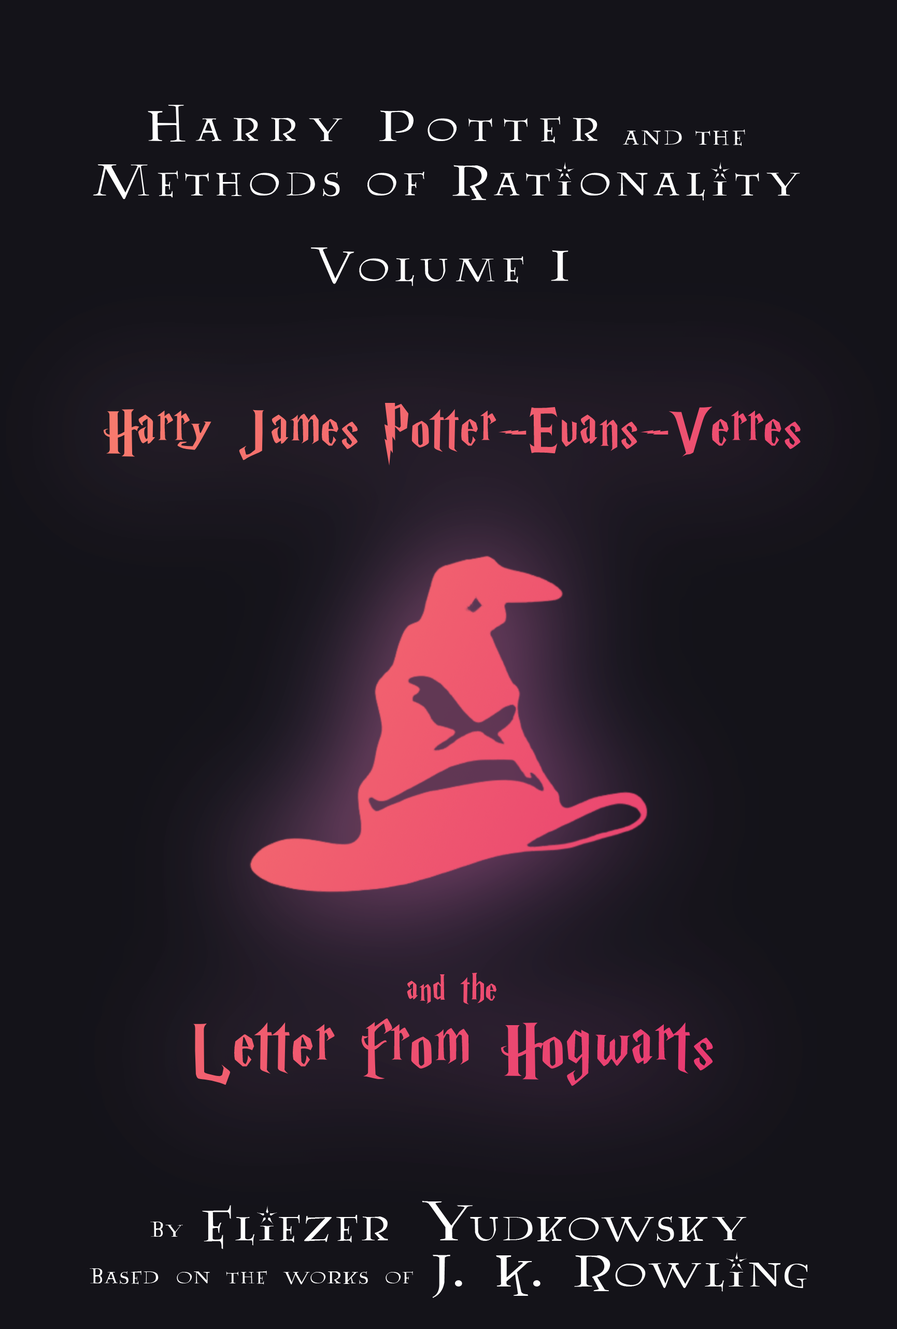
<style>
.page{position:relative;width:897px;height:1329px;background:#141319}
.page>*{position:absolute;margin:0}
.t1{font:50.3px/54.5px "Lumos";letter-spacing:0.1em;color:#ffffff}
.t2{font:50.3px/35.7px "Lumos";letter-spacing:0.2em;color:#ffffff}
.t3{font:31.1px/35.7px "Lumos";letter-spacing:0.05em;color:#ffffff}
.t4{font:50.3px "Lumos";letter-spacing:0.1em;color:#ffffff}
.t5{font:64.8px/77.8px "HarryP";letter-spacing:0.025em;color:#ef5770}
.t6{font:41.5px/77.8px "HarryP";letter-spacing:0.025em;color:#ef5770}
.t7{font:77.8px/77.8px "HarryP";letter-spacing:0.025em;color:#ef5770}
.t8{font:25.9px/46.1px "AA-Lumos-Caps";letter-spacing:0.05em;color:#ffffff}
.t9{font:51.8px/46.1px "AA-Lumos-Caps";letter-spacing:0.05em;color:#ffffff}
</style>
<div class="page">
<p class="t1" style="left:93px;top:105px;width:707px;height:96px;text-align:center"><span class="t2">Harry Potter  </span><span class="t3">and the<br></span>Methods of Rationality</p>
<p class="t4" style="left:311px;top:247px;width:258px;height:39px">Volume I</p>
<p class="t5" style="left:103px;top:402px;width:698px;height:684px;text-align:center">Harry James Potter-Evans-Verres<br><br><br><br><br><br><br><span class="t6">and the<br></span><span class="t7">Letter from Hogwarts</span></p>
<p class="t8" style="left:90px;top:1201px;width:718px;height:97px;text-align:center">By <span class="t9">Eliezer Yudkowsky<br></span>Based on the works of <span class="t9">J. K. Rowling</span></p>
</div>
